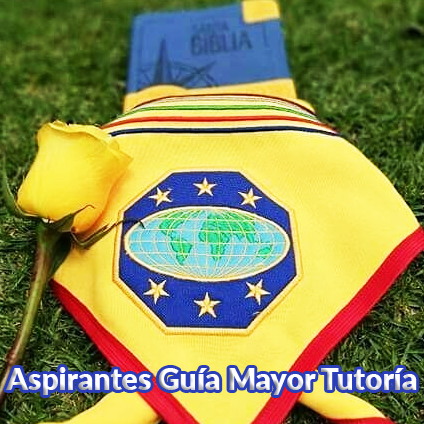
<style>
.page{position:relative;width:424px;height:424px}
.page>*{position:absolute;margin:0}
.t1{font:30px "Lato-Black";color:#ffffff}
</style>
<div class="page">
<p class="t1" style="left:6px;top:367px;width:411px;height:28px">Aspirantes Guía Mayor Tutoría</p>
</div>
